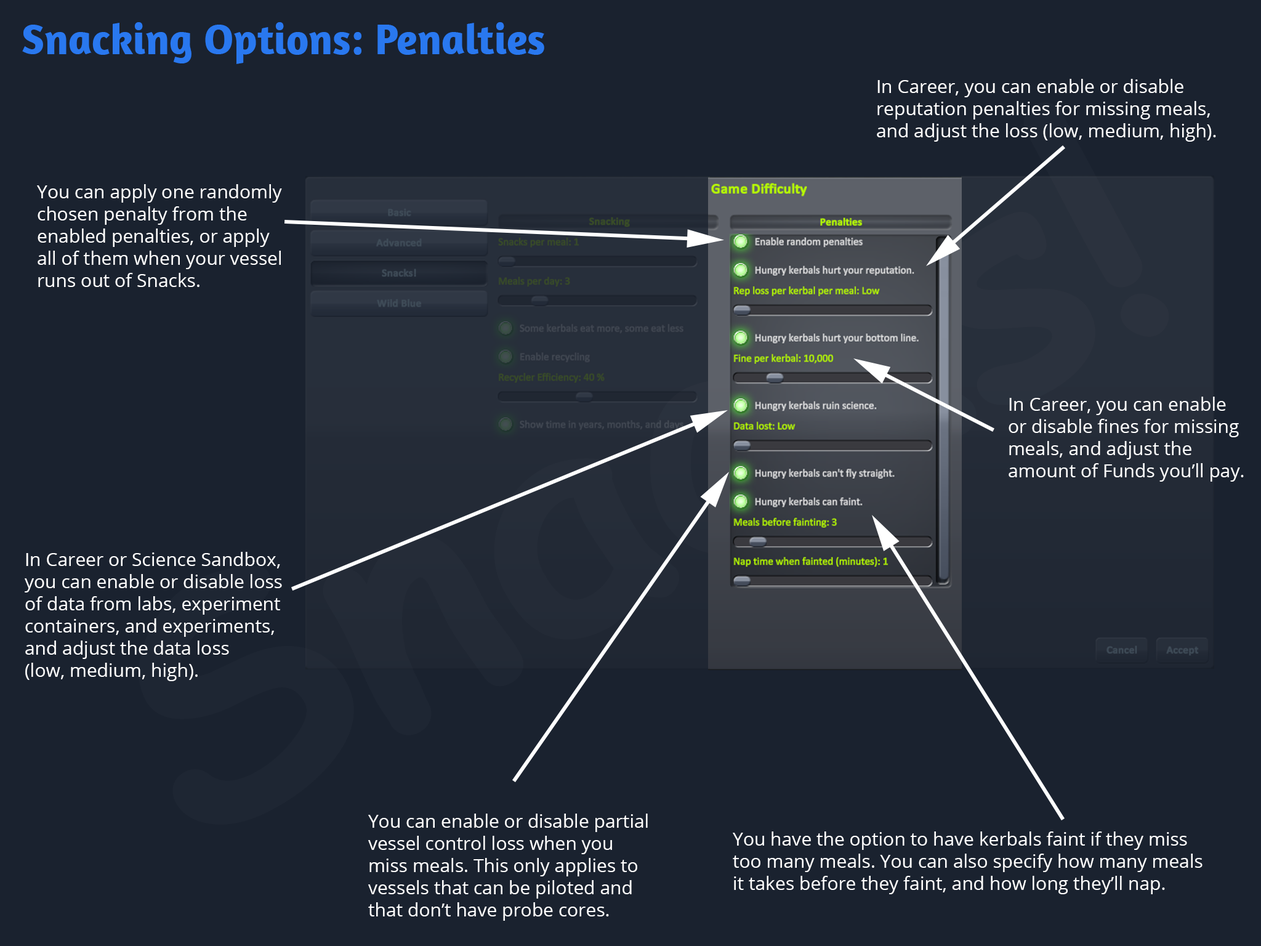
<style>
.page{position:relative;width:1261px;height:946px;background:#1a222f}
.page>*{position:absolute;margin:0}
.t1{font:43.1px "Amaranth-Bold";color:#2978ef}
.t2{font:18.5px "OpenSans";color:#ffffff}
</style>
<div class="page">
<p class="t1" style="left:22px;top:22px;width:522px;height:42px">Snacking Options: Penalties</p>
<p class="t2" style="left:877px;top:79px;width:339px;height:63px">In Career, you can enable or disable<br>reputation penalties for missing meals,<br>and adjust the loss (low, medium, high).</p>
<p class="t2" style="left:37px;top:184px;width:245px;height:103px">You can apply one randomly<br>chosen penalty from the<br>enabled penalties, or apply<br>all of them when your vessel<br>runs out of Snacks.</p>
<p class="t2" style="left:1008px;top:396px;width:236px;height:85px">In Career, you can enable <br>or disable fines for missing <br>meals, and adjust the <br>amount of Funds you’ll pay.</p>
<p class="t2" style="left:25px;top:552px;width:257px;height:129px">In Career or Science Sandbox, <br>you can enable or disable loss <br>of data from labs, experiment<br>containers, and experiments, <br>and adjust the data loss <br>(low, medium, high).</p>
<p class="t2" style="left:368px;top:813px;width:280px;height:107px">You can enable or disable partial <br>vessel control loss when you <br>miss meals. This only applies to <br>vessels that can be piloted and <br>that don’t have probe cores.</p>
<p class="t2" style="left:733px;top:831px;width:469px;height:63px">You have the option to have kerbals faint if they miss<br>too many meals. You can also specify how many meals<br>it takes before they faint, and how long they’ll nap.</p>
</div>
